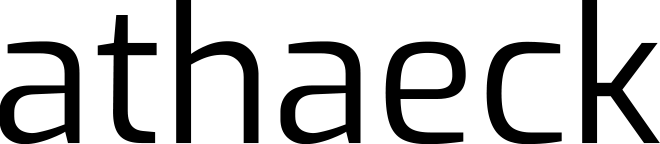
<style>
.page{position:relative;width:660px;height:144px;background:#ffffff}
.page>*{position:absolute;margin:0}
.t1{font:187.4px "Exo-Regular";color:#000000}
</style>
<div class="page">
<p class="t1" style="left:0px;top:0px;width:660px;height:145px">athaeck</p>
</div>
